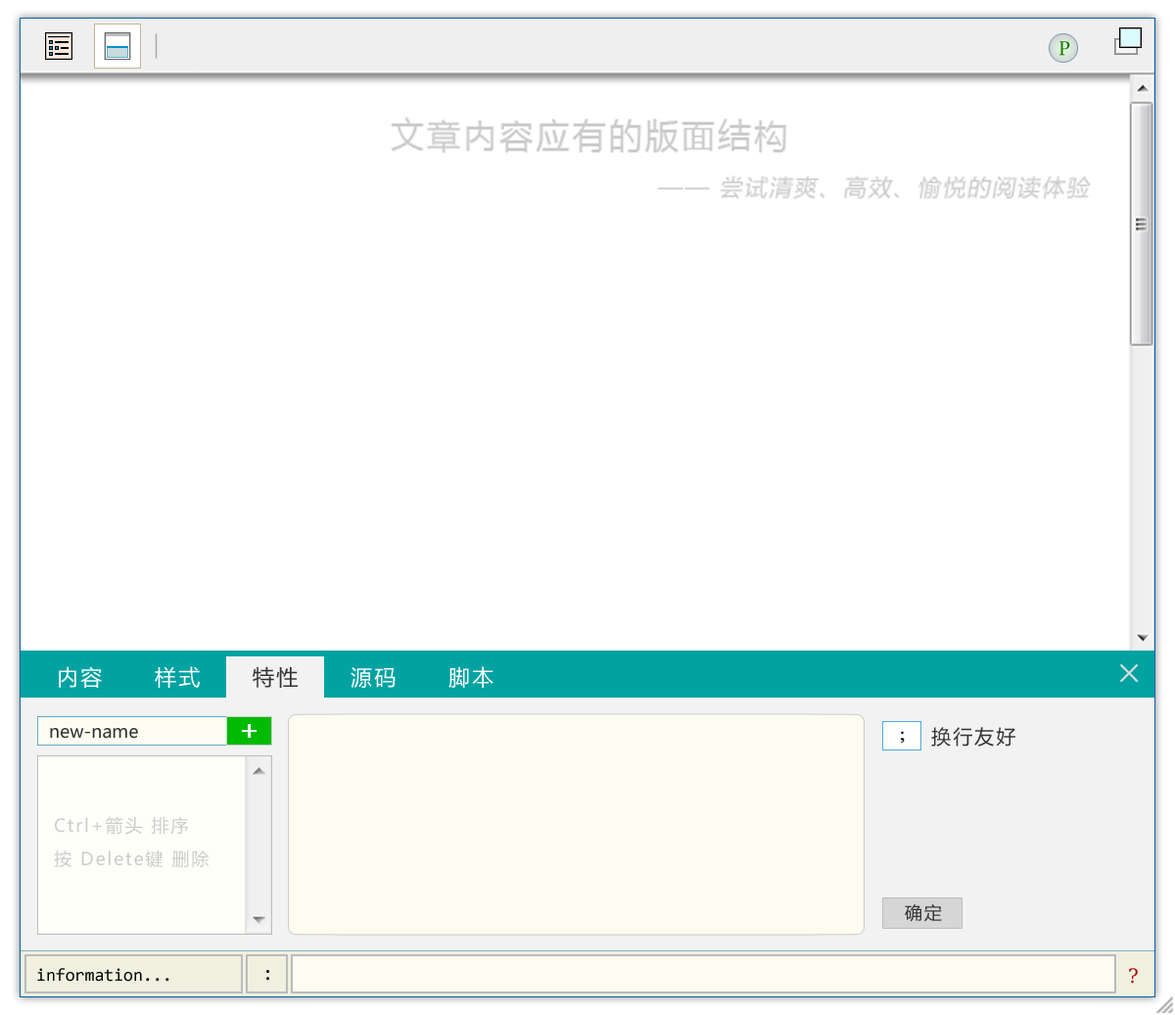
<style>
.page{position:relative;width:1175px;height:1015px;background:#ffffff}
.page>*{position:absolute;margin:0}
.t1{font:19.6px "Constantia";color:#1b7802}
.t2{font:21.5px "MicrosoftYaHei";letter-spacing:0.1em;color:#ffffff}
.t3{font:21.5px "MicrosoftYaHei";letter-spacing:0.1em;color:#333333}
.t4{font:27.4px "NSimSun";letter-spacing:0.1em;color:#dddddd;font-weight:bold}
.t5{font:17.6px "MicrosoftYaHei";color:#333333}
.t6{font:17.6px "TimesNewRomanPSMT";letter-spacing:0.1em;color:#000000;font-weight:bold}
.t7{font:19.6px "MicrosoftYaHei";letter-spacing:0.1em;color:#333333}
.t8{font:17.6px "MicrosoftYaHei";letter-spacing:0.1em;color:#cccccc}
.t9{font:17.6px "MicrosoftYaHei";letter-spacing:0.1em;color:#333333}
.t10{font:17.6px "Consolas";color:#000000}
.t11{font:19.6px "Consolas";color:#000000}
.t12{font:19.6px "DejaVuSerif";color:#aa0000}
</style>
<div class="page">
<p class="t1" style="left:1060px;top:41px;width:10px;height:15px">P</p>
<p class="t2" style="left:59px;top:666px;width:43px;height:22px">内容</p>
<p class="t2" style="left:155px;top:666px;width:45px;height:22px">样式</p>
<p class="t3" style="left:253px;top:666px;width:45px;height:22px">特性</p>
<p class="t2" style="left:449px;top:666px;width:45px;height:22px">脚本</p>
<p class="t4" style="left:1120px;top:664px;width:19px;height:18px">×</p>
<p class="t2" style="left:351px;top:667px;width:45px;height:21px">源码</p>
<p class="t5" style="left:50px;top:728px;width:88px;height:10px">new-name</p>
<p class="t6" style="left:901px;top:731px;width:4px;height:12px">;</p>
<p class="t7" style="left:931px;top:727px;width:85px;height:19px">换行友好</p>
<p class="t8" style="left:55px;top:816px;width:133px;height:18px">Ctrl+箭头 排序</p>
<p class="t8" style="left:54px;top:850px;width:156px;height:18px">按 Delete键 删除</p>
<p class="t9" style="left:905px;top:904px;width:37px;height:18px">确定</p>
<p class="t10" style="left:37px;top:968px;width:132px;height:13px">information...</p>
<p class="t11" style="left:266px;top:970px;width:3px;height:10px">:</p>
<p class="t12" style="left:1129px;top:968px;width:9px;height:15px">?</p>
</div>
